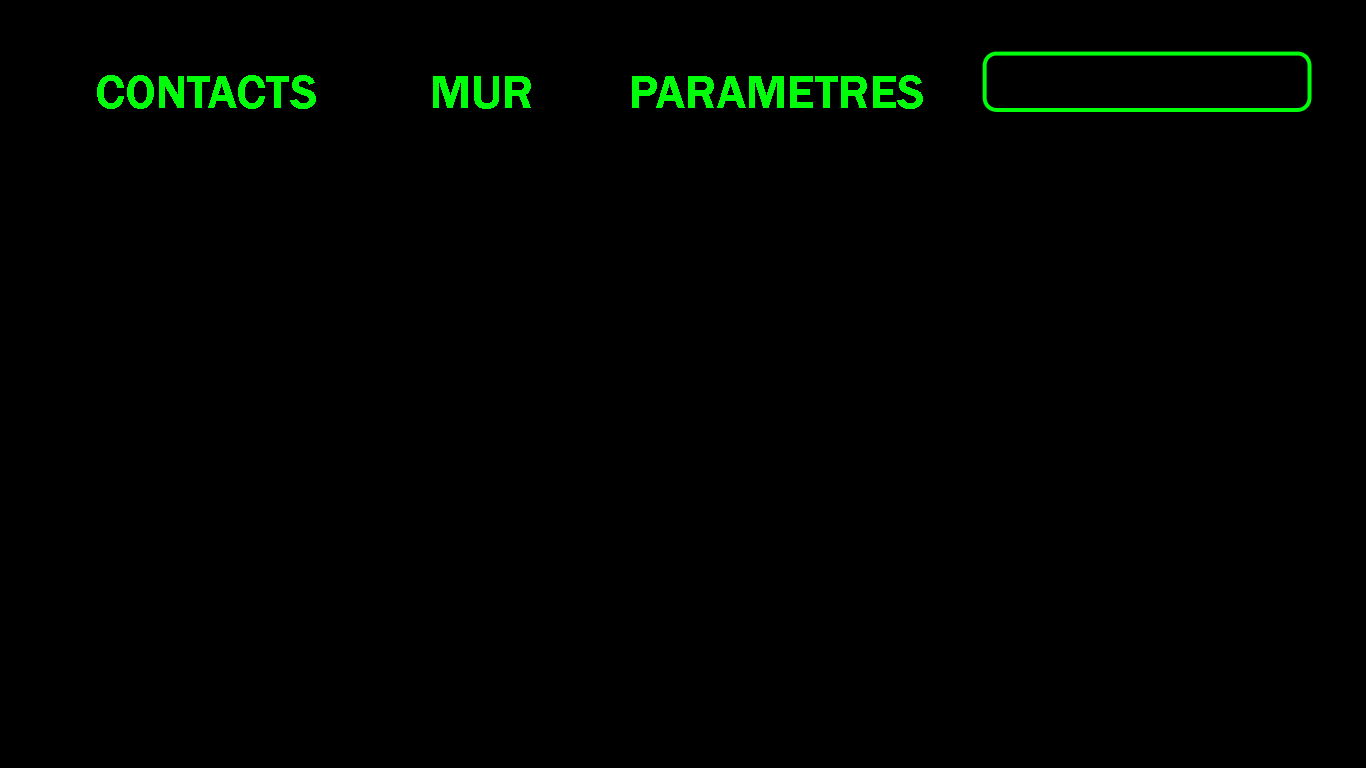
<style>
.page{position:relative;width:1366px;height:768px;background:#000000}
.page>*{position:absolute;margin:0}
.t1{font:48px "FranklinGothic-Demi";color:#00fe0a}
</style>
<div class="page">
<p class="t1" style="left:97px;top:75px;width:219px;height:34px">CONTACTS</p>
<p class="t1" style="left:433px;top:76px;width:98px;height:33px">MUR</p>
<p class="t1" style="left:632px;top:75px;width:291px;height:34px">PARAMETRES</p>
</div>
